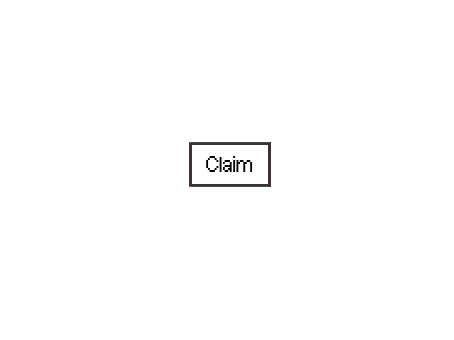
<style>
.page{position:relative;width:454px;height:340px;background:#ffffff}
.page>*{position:absolute;margin:0}
.t1{font:21.7px "C&CRedAlertLAN";color:#030303}
</style>
<div class="page">
<p class="t1" style="left:206px;top:156px;width:47px;height:16px">Claim</p>
</div>
